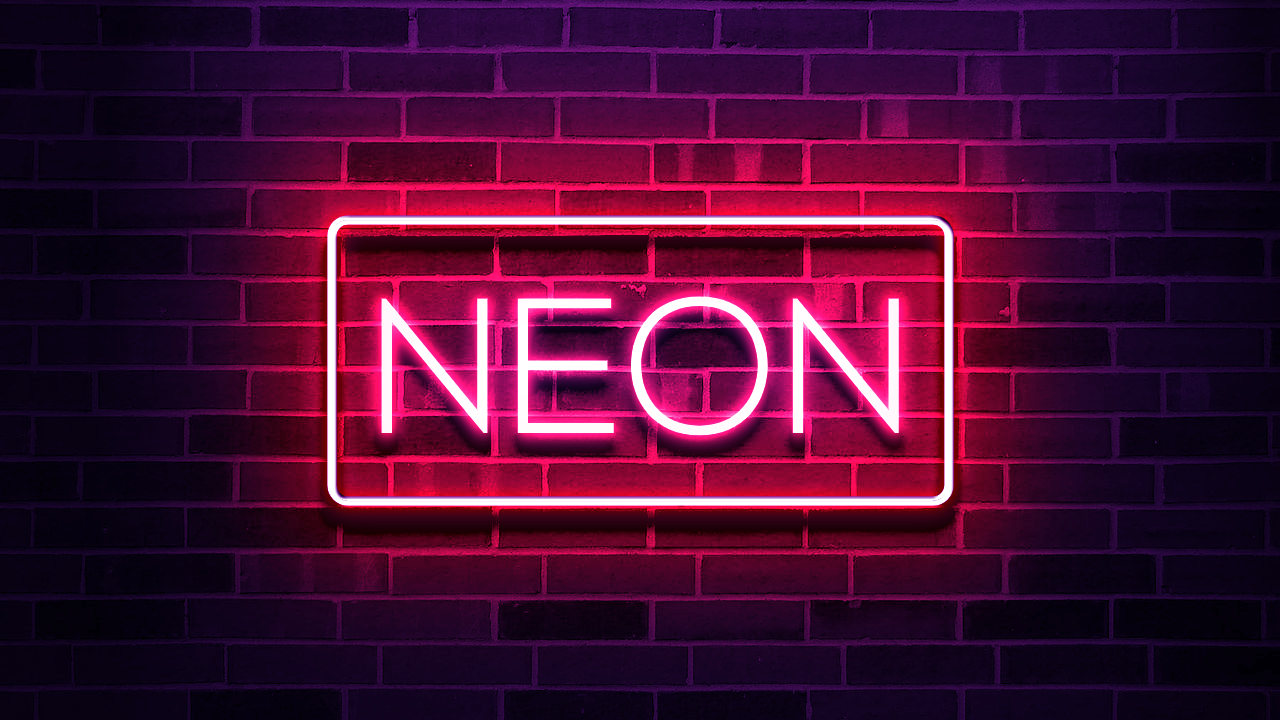
<style>
.page{position:relative;width:1280px;height:720px}
.page>*{position:absolute;margin:0}
.t1{font:192.1px "NexaLight";color:#fffdfe}
</style>
<div class="page">
<p class="t1" style="left:381px;top:296px;width:518px;height:140px">NEON</p>
</div>
